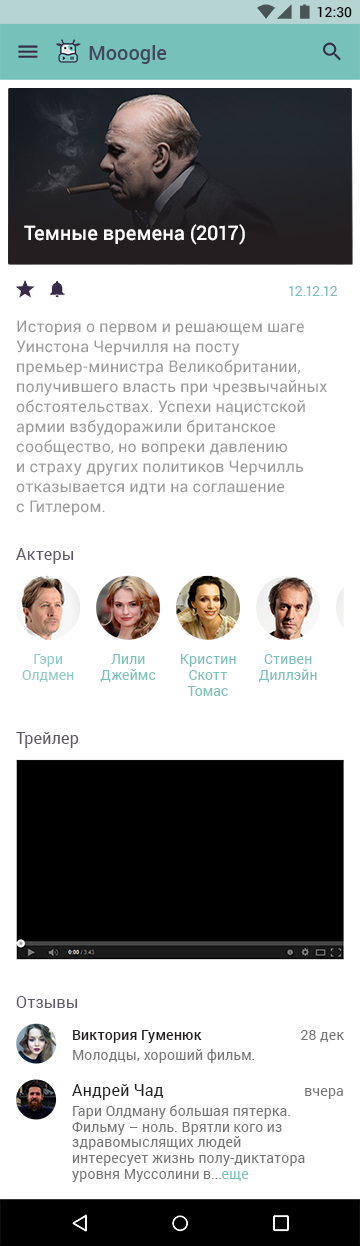
<style>
.page{position:relative;width:360px;height:1246px;background:#ffffff}
.page>*{position:absolute;margin:0}
.t1{font:14px "Roboto-Medium";color:#000000}
.t2{font:20px "Roboto-Medium";letter-spacing:0.005em;color:#41485b}
.t3{font:20px "Roboto-Medium";color:#ffffff}
.t4{font:14px "Roboto-Regular";letter-spacing:0.01em;color:#77c1bb}
.t5{font:16px/20px "Roboto-Regular";letter-spacing:0.01em;color:#9a9a9a}
.t6{font:16px "Roboto-Regular";letter-spacing:0.005em;color:#5e576a}
.t7{font:14px/16px "Roboto-Regular";letter-spacing:0.005em;color:#77c1bb}
.t8{font:14px "Roboto-Medium";letter-spacing:0.01em;color:#231f20}
.t9{font:14px "Roboto-Regular";letter-spacing:0.01em;color:#757575}
.t10{font:16px "Roboto-Regular";letter-spacing:0.01em;color:#212121}
.t11{font:14px/16px "Roboto-Regular";letter-spacing:0.01em;color:#757575}
.t12{font:14px/16px "Roboto-Regular";letter-spacing:0.01em;color:#77c1bb}
</style>
<div class="page">
<p class="t1" style="left:317px;top:7px;width:35px;height:11px">12:30</p>
<p class="t2" style="left:89px;top:45px;width:78px;height:19px">Mooogle</p>
<p class="t3" style="left:24px;top:224px;width:221px;height:21px">Темные времена (2017)</p>
<p class="t4" style="left:289px;top:286px;width:49px;height:10px">12.12.12</p>
<p class="t5" style="left:16px;top:320px;width:311px;height:196px">История о первом и решающем шаге Уинстона Черчилля на посту премьер-министра Великобритании, получившего власть при чрезвычайных обстоятельствах. Успехи нацистской армии взбудоражили британское сообщество, но вопреки давлению <br>и страху других политиков Черчилль отказывается идти на соглашение <br>с Гитлером.</p>
<p class="t6" style="left:16px;top:548px;width:58px;height:16px">Актеры</p>
<p class="t7" style="left:22px;top:654px;width:52px;height:28px;text-align:center;opacity:0.87">Гэри Олдмен</p>
<p class="t7" style="left:100px;top:654px;width:56px;height:28px;text-align:center">Лили Джеймс</p>
<p class="t7" style="left:180px;top:654px;width:56px;height:42px;text-align:center">Кристин Скотт Томас</p>
<p class="t7" style="left:259px;top:654px;width:58px;height:28px;text-align:center">Стивен Диллэйн</p>
<p class="t6" style="left:16px;top:732px;width:63px;height:16px">Трейлер</p>
<p class="t6" style="left:16px;top:996px;width:62px;height:12px">Отзывы</p>
<p class="t8" style="left:73px;top:1030px;width:129px;height:13px">Виктория Гуменюк</p>
<p class="t9" style="left:301px;top:1030px;width:43px;height:12px">28 дек</p>
<p class="t9" style="left:73px;top:1049px;width:182px;height:14px">Молодцы, хороший фильм.</p>
<p class="t10" style="left:72px;top:1084px;width:92px;height:16px">Андрей Чад</p>
<p class="t9" style="left:305px;top:1088px;width:38px;height:11px">вчера</p>
<p class="t11" style="left:72px;top:1105px;width:233px;height:77px">Гари Олдману большая пятерка. Фильму – ноль. Врятли кого из здравомыслящих людей интересует жизнь полу-диктатора уровня Муссолини в...<span class="t12">еще</span></p>
</div>
